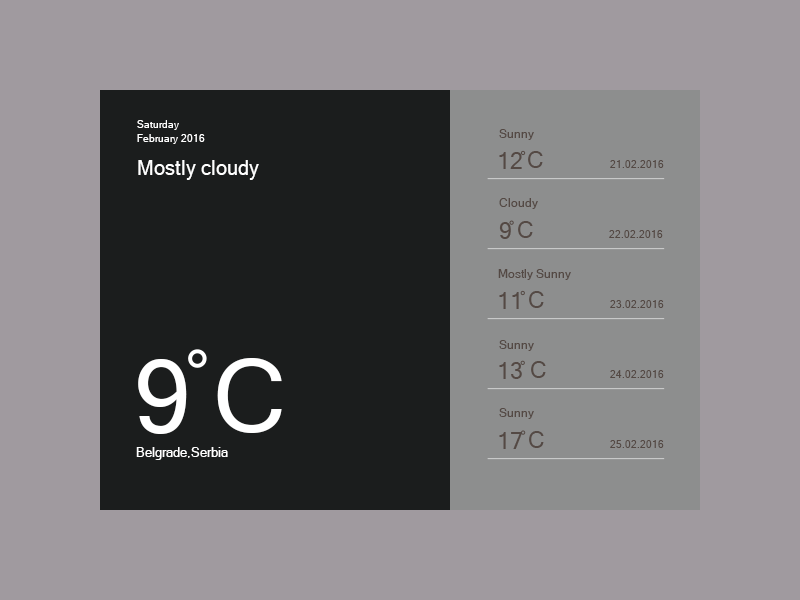
<style>
.page{position:relative;width:800px;height:600px;background:#a09a9f}
.page>*{position:absolute;margin:0}
.t1{font:10px "MicrosoftSansSerif";color:#ffffff}
.t2{font:12px "MicrosoftSansSerif";color:#544944}
.t3{font:20px "MicrosoftSansSerif";color:#ffffff}
.t4{font:23.2px "MicrosoftSansSerif";color:#544944}
.t5{font:10px "MicrosoftSansSerif";color:#544944}
.t6{font:101.7px "MicrosoftSansSerif";color:#ffffff}
.t7{font:13px "MicrosoftSansSerif";color:#ffffff}
</style>
<div class="page">
<p class="t1" style="left:137px;top:120px;width:42px;height:10px">Saturday</p>
<p class="t1" style="left:137px;top:134px;width:68px;height:10px">February 2016</p>
<p class="t2" style="left:499px;top:129px;width:35px;height:11px">Sunny</p>
<p class="t3" style="left:138px;top:160px;width:121px;height:20px">Mostly cloudy</p>
<p class="t4" style="left:499px;top:152px;width:23px;height:17px">12</p>
<p class="t4" style="left:528px;top:151px;width:15px;height:17px">C</p>
<p class="t5" style="left:610px;top:160px;width:54px;height:8px">21.02.2016</p>
<p class="t2" style="left:499px;top:198px;width:39px;height:11px">Cloudy</p>
<p class="t4" style="left:499px;top:222px;width:12px;height:17px">9</p>
<p class="t4" style="left:518px;top:221px;width:15px;height:17px">C</p>
<p class="t5" style="left:609px;top:230px;width:54px;height:8px">22.02.2016</p>
<p class="t2" style="left:498px;top:269px;width:73px;height:11px">Mostly Sunny</p>
<p class="t4" style="left:499px;top:292px;width:20px;height:17px">11</p>
<p class="t4" style="left:529px;top:291px;width:15px;height:17px">C</p>
<p class="t5" style="left:610px;top:300px;width:54px;height:8px">23.02.2016</p>
<p class="t2" style="left:499px;top:340px;width:35px;height:11px">Sunny</p>
<p class="t6" style="left:138px;top:359px;width:49px;height:75px">9</p>
<p class="t6" style="left:217px;top:358px;width:65px;height:75px">C</p>
<p class="t4" style="left:499px;top:362px;width:23px;height:17px">13</p>
<p class="t4" style="left:531px;top:361px;width:15px;height:17px">C</p>
<p class="t5" style="left:610px;top:370px;width:54px;height:8px">24.02.2016</p>
<p class="t2" style="left:499px;top:408px;width:35px;height:11px">Sunny</p>
<p class="t4" style="left:499px;top:432px;width:23px;height:17px">17</p>
<p class="t4" style="left:529px;top:431px;width:15px;height:17px">C</p>
<p class="t7" style="left:136px;top:447px;width:92px;height:13px">Belgrade,Serbia</p>
<p class="t5" style="left:610px;top:440px;width:54px;height:8px">25.02.2016</p>
</div>
